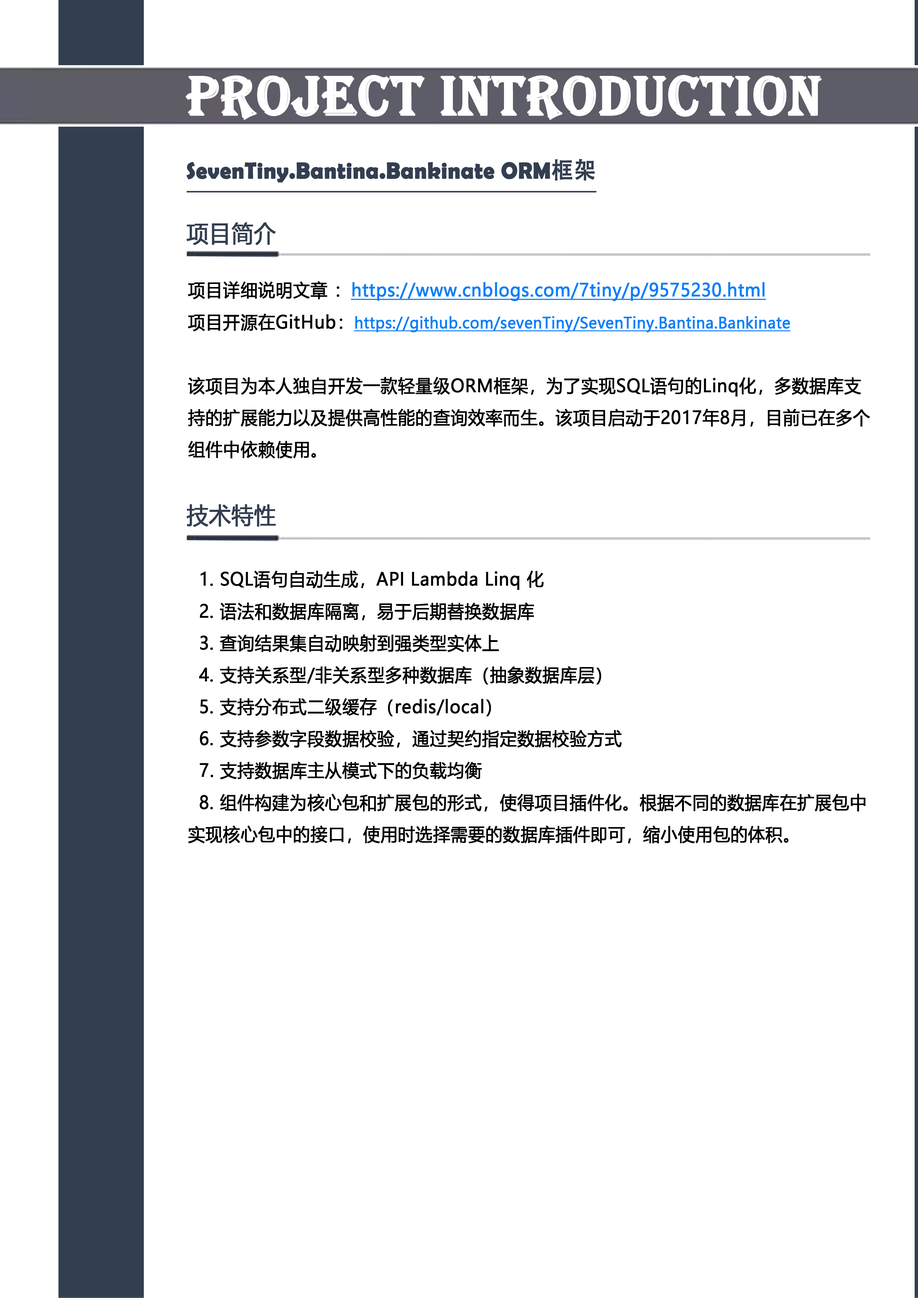
<style>
.page{position:relative;width:918px;height:1298px;background:#ffffff}
.page>*{position:absolute;margin:0}
.t1{font:57.4px "Algerian";letter-spacing:0.005em;color:#ffffff;font-weight:bold;scale:0.95 1}
.t2{font:23px "BerlinSansFBDemi-Bold";letter-spacing:0.005em;color:#333e50;font-weight:bold;scale:0.95 1}
.t3{font:23px "AdobeHeitiStd-Regular";letter-spacing:0.005em;color:#333e50;font-weight:bold;scale:0.95 1}
.t4{font:23px "MicrosoftYaHei";letter-spacing:0.005em;color:#333e50;font-weight:bold;scale:0.95 1}
.t5{font:17.9px/31.9px "MicrosoftYaHei";letter-spacing:0.005em;color:#000000;font-weight:bold;scale:0.95 1}
.t6{font:17.9px/31.9px "MicrosoftYaHei";letter-spacing:0.005em;color:#087ff9;font-weight:bold;text-decoration:underline;scale:0.95 1}
.t7{font:15.3px/28.1px "MicrosoftYaHei";letter-spacing:0.005em;color:#087ff9;font-weight:bold;text-decoration:underline;scale:0.95 1}
</style>
<div class="page">
<p class="t1" style="left:185px;top:75px;width:637px;height:45px">PROJECT INTRODUCTION</p>
<p class="t2" style="left:186px;top:159px;width:409px;height:24px">SevenTiny.Bantina.Bankinate ORM<span class="t3">框架</span></p>
<p class="t4" style="left:186px;top:223px;width:90px;height:22px">项目简介</p>
<p class="t5" style="left:188px;top:281px;width:682px;height:178px">项目详细说明文章 ：<span class="t6">https://www.cnblogs.com/7tiny/p/9575230.html<br></span>项目开源在GitHub：<span class="t7">https://github.com/sevenTiny/SevenTiny.Bantina.Bankinate</span>   <br><br>该项目为本人独自开发一款轻量级ORM框架，为了实现SQL语句的Linq化，多数据库支持的扩展能力以及提供高性能的查询效率而生。该项目启动于2017年8月，目前已在多个组件中依赖使用。</p>
<p class="t4" style="left:186px;top:504px;width:90px;height:23px">技术特性</p>
<p class="t5" style="left:188px;top:571px;width:678px;height:273px">1. SQL语句自动生成，API Lambda Linq 化<br> 2. 语法和数据库隔离，易于后期替换数据库<br> 3. 查询结果集自动映射到强类型实体上<br> 4. 支持关系型/非关系型多种数据库（抽象数据库层）<br> 5. 支持分布式二级缓存（redis/local）<br> 6. 支持参数字段数据校验，通过契约指定数据校验方式<br>  7. 支持数据库主从模式下的负载均衡<br> 8. 组件构建为核心包和扩展包的形式，使得项目插件化。根据不同的数据库在扩展包中实现核心包中的接口，使用时选择需要的数据库插件即可，缩小使用包的体积。</p>
</div>
